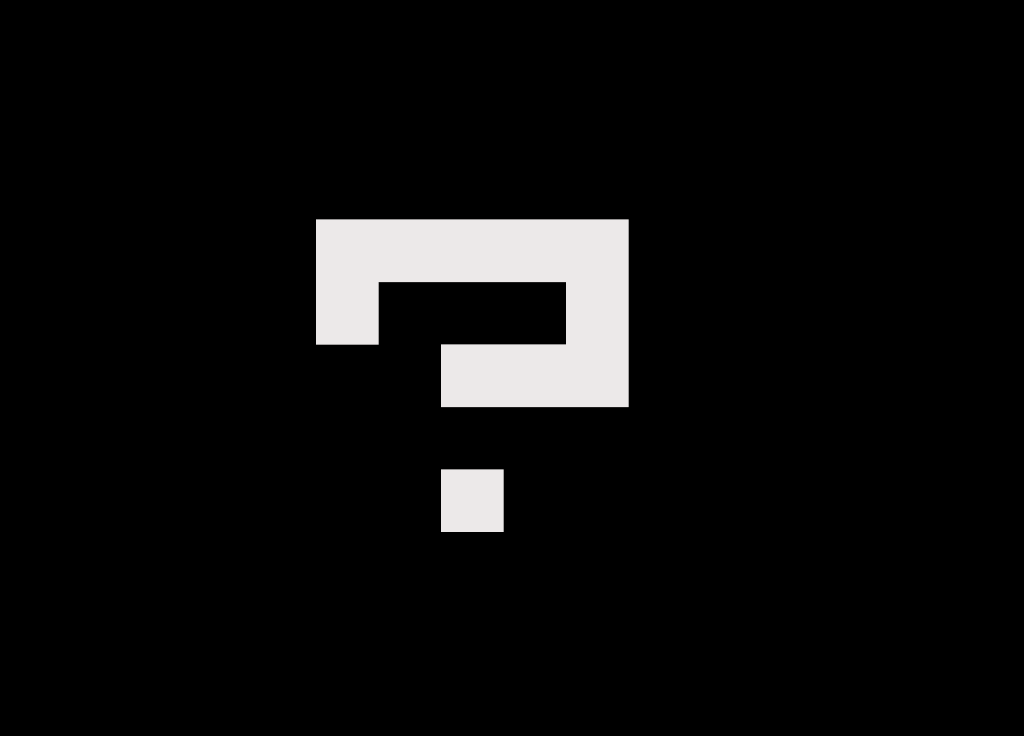
<style>
.page{position:relative;width:1024px;height:736px;background:#000000}
.page>*{position:absolute;margin:0}
.t1{font:500px "BIGBLOCKS";color:#ece9e9}
</style>
<div class="page">
<p class="t1" style="left:316px;top:219px;width:313px;height:313px">?</p>
</div>
